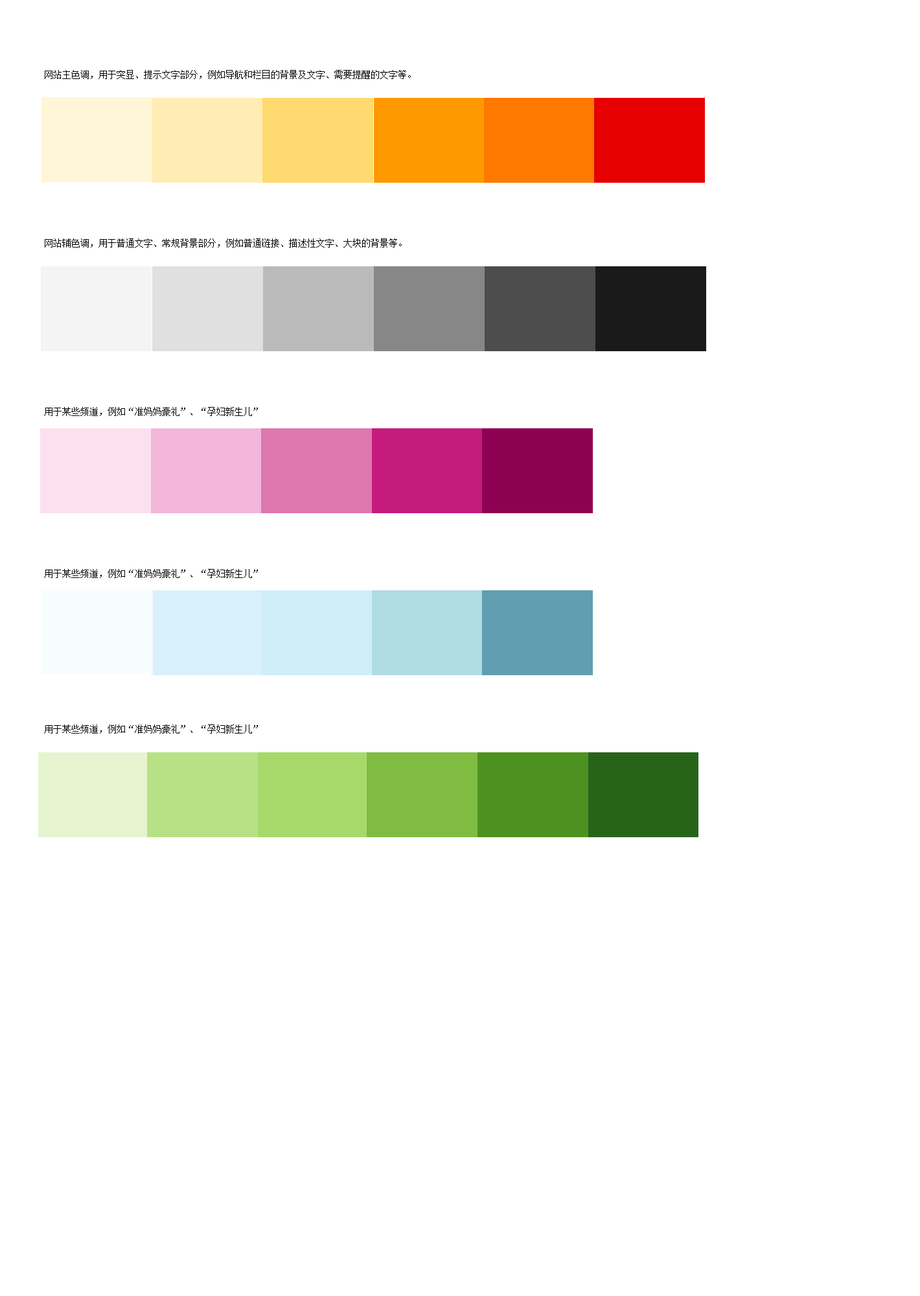
<style>
.page{position:relative;width:920px;height:1296px;background:#ffffff}
.page>*{position:absolute;margin:0}
.t1{font:9.1px "SimSun";color:#000000}
</style>
<div class="page">
<p class="t1" style="left:45px;top:70px;width:366px;height:9px">网站主色调，用于突显、提示文字部分，例如导航和栏目的背景及文字、需要提醒的文字等。</p>
<p class="t1" style="left:45px;top:238px;width:357px;height:10px">网站辅色调，用于普通文字、常规背景部分，例如普通链接、描述性文字、大块的背景等。</p>
<p class="t1" style="left:44px;top:407px;width:214px;height:9px">用于某些频道，例如“准妈妈豪礼”、“孕妇新生儿”</p>
<p class="t1" style="left:44px;top:569px;width:214px;height:9px">用于某些频道，例如“准妈妈豪礼”、“孕妇新生儿”</p>
<p class="t1" style="left:44px;top:724px;width:214px;height:10px">用于某些频道，例如“准妈妈豪礼”、“孕妇新生儿”</p>
</div>
